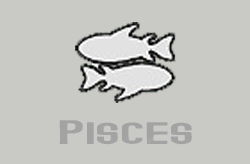
<style>
.page{position:relative;width:250px;height:164px;background:#c9c9c6}
.page>*{position:absolute;margin:0}
.t1{font:34.7px "Mountana-Regular";letter-spacing:-0.05em;color:#a3a3a3;scale:2.24 1}
</style>
<div class="page">
<p class="t1" style="left:59px;top:120px;width:133px;height:25px">Pisces</p>
</div>
